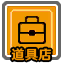
<style>
.page{position:relative;width:64px;height:64px}
.page>*{position:absolute;margin:0}
.t1{font:13px "HYWenHei-HEW";letter-spacing:0.045em;color:#f19602}
</style>
<div class="page">
<p class="t1" style="left:11px;top:48px;width:40px;height:13px">道具店</p>
</div>
